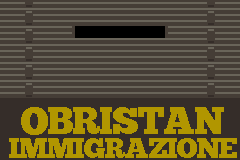
<style>
.page{position:relative;width:240px;height:160px;background:#453d36}
.page>*{position:absolute;margin:0}
.t1{font:37.7px "ChunkFive";letter-spacing:-0.025em;color:#b19600}
.t2{font:28px "ChunkFive";letter-spacing:-0.025em;color:#b19600}
</style>
<div class="page">
<p class="t1" style="left:21px;top:107px;width:203px;height:28px">OBRISTAN</p>
<p class="t2" style="left:9px;top:138px;width:228px;height:20px">IMMIGRAZIONE</p>
</div>
